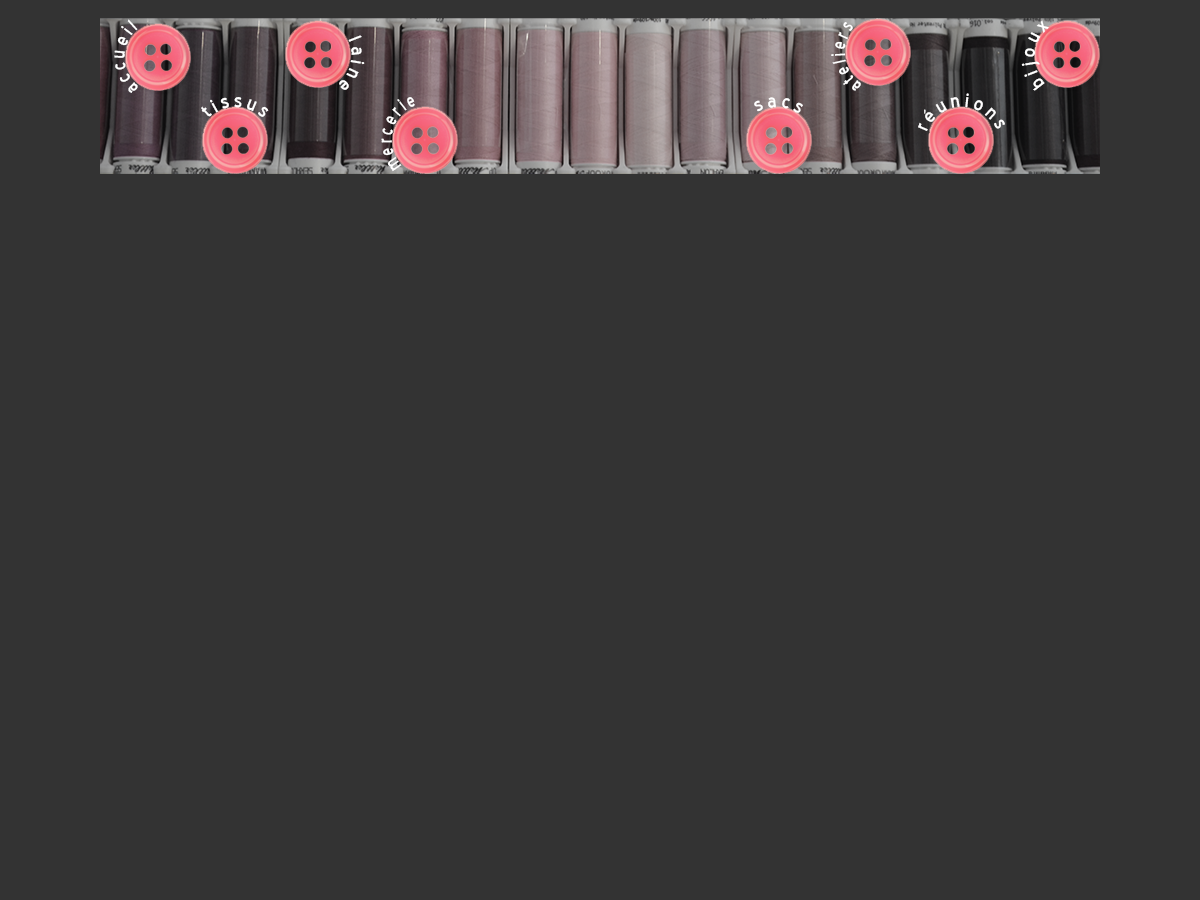
<style>
.page{position:relative;width:1200px;height:900px;background:#333333}
.page>*{position:absolute;margin:0}
.t1{font:18px "BlueHighway-Regular";letter-spacing:0.2em;color:#ffffff;scale:0.9 1}
.t2{font:18px "BlueHighway-Regular";letter-spacing:0.2em;color:#ffffff;scale:0.8 1}
.t3{font:18px "BlueHighway-Regular";letter-spacing:0.2em;color:#ffffff}
.t4{font:18px "BlueHighway-Regular";letter-spacing:0.2em;color:#7e1532}
.t5{font:18px "BlueHighway-Regular";letter-spacing:0.2em;color:#fffefe}
</style>
<div class="page">
<p class="t1" style="left:114px;top:19px;width:24px;height:74px;rotate:-89deg">accueil</p>
<p class="t2" style="left:831px;top:22px;width:30px;height:69px;rotate:-154deg">ateliers</p>
<p class="t3" style="left:1021px;top:20px;width:28px;height:71px;rotate:-123deg">bijoux</p>
<p class="t3" style="left:339px;top:35px;width:26px;height:55px;rotate:106deg">laine</p>
<p class="t3" style="left:201px;top:97px;width:68px;height:20px;rotate:1deg">tissus</p>
<p class="t2" style="left:381px;top:97px;width:34px;height:75px;rotate:-19deg">mercerie</p>
<p class="t3" style="left:754px;top:97px;width:49px;height:16px"><span class="t4"> </span>sacs</p>
<p class="t5" style="left:918px;top:93px;width:87px;height:38px;rotate:2deg">réunions</p>
</div>
